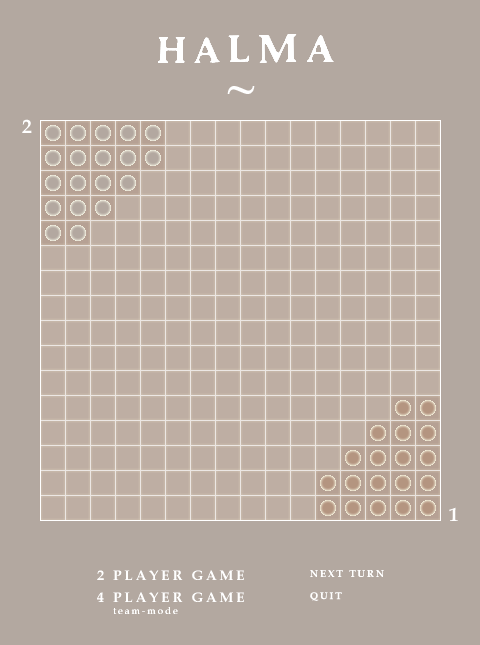
<style>
.page{position:relative;width:480px;height:645px;background:#b3a8a0}
.page>*{position:absolute;margin:0}
.t1{font:19.4px "BookAntiqua-Bold";letter-spacing:0.2em;color:#ffffff}
.t2{font:13.9px "BookAntiqua-Bold";letter-spacing:0.2em;color:#ffffff}
.t3{font:9.7px "BookAntiqua-Bold";letter-spacing:0.2em;color:#ffffff}
.t4{font:9.7px "BookAntiqua";letter-spacing:0.2em;color:#ffffff}
</style>
<div class="page">
<p class="t1" style="left:22px;top:119px;width:10px;height:14px">2</p>
<p class="t1" style="left:449px;top:507px;width:9px;height:14px">1</p>
<p class="t2" style="left:97px;top:570px;width:147px;height:10px">2 PLAYER GAME</p>
<p class="t3" style="left:310px;top:570px;width:74px;height:7px">NEXT TURN</p>
<p class="t2" style="left:97px;top:592px;width:147px;height:10px">4 PLAYER GAME</p>
<p class="t3" style="left:310px;top:592px;width:32px;height:9px">QUIT</p>
<p class="t4" style="left:113px;top:607px;width:65px;height:7px">team-mode</p>
</div>
